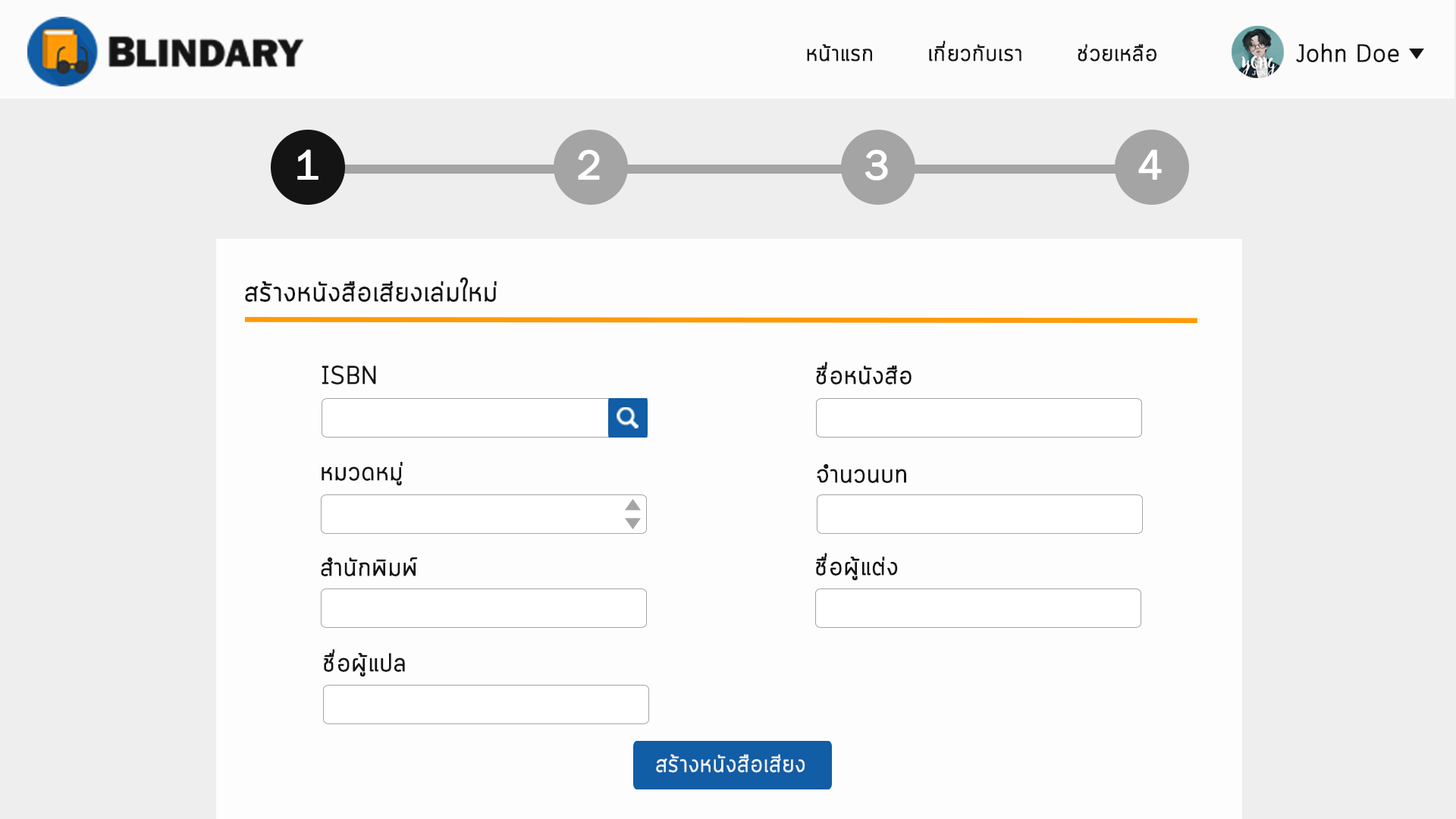
<style>
.page{position:relative;width:1456px;height:819px;background:#fdfdfd}
.page>*{position:absolute;margin:0}
.t1{font:22.7px "Cloud-Light";color:#141414;font-weight:bold}
.t2{font:24.2px "Cloud-Light";color:#141414;font-weight:bold}
.t3{font:42.1px "FranklinGothic-Book";color:#ffffff;font-weight:bold}
.t4{font:42.1px "FranklinGothic-Book";color:#fefefe;font-weight:bold}
.t5{font:27.3px "Cloud-Light";color:#141414;font-weight:bold}
.t6{font:25px "Cloud-Light";color:#141414;font-weight:bold}
.t7{font:23.7px "Cloud-Light";color:#efefef;font-weight:bold}
</style>
<div class="page">
<p class="t1" style="left:807px;top:40px;width:349px;height:21px">หน้าแรก       เกี่ยวกับเรา       ช่วยเหลือ</p>
<p class="t2" style="left:1296px;top:43px;width:103px;height:19px">John Doe</p>
<p class="t3" style="left:297px;top:149px;width:21px;height:31px">1</p>
<p class="t4" style="left:578px;top:149px;width:22px;height:31px">2</p>
<p class="t3" style="left:865px;top:149px;width:23px;height:31px">3</p>
<p class="t3" style="left:1138px;top:149px;width:24px;height:31px">4</p>
<p class="t5" style="left:245px;top:277px;width:252px;height:25px">สร้างหนังสือเสียงเล่มใหม่</p>
<p class="t6" style="left:322px;top:366px;width:54px;height:18px">ISBN</p>
<p class="t6" style="left:816px;top:362px;width:96px;height:22px">ชื่อหนังสือ</p>
<p class="t6" style="left:322px;top:462px;width:81px;height:24px">หมวดหมู่</p>
<p class="t6" style="left:817px;top:464px;width:89px;height:19px">จำนวนบท</p>
<p class="t6" style="left:321px;top:557px;width:97px;height:19px">สำนักพิมพ์</p>
<p class="t6" style="left:816px;top:553px;width:82px;height:28px">ชื่อผู้แต่ง</p>
<p class="t6" style="left:324px;top:649px;width:81px;height:28px">ชื่อผู้แปล</p>
<p class="t7" style="left:656px;top:754px;width:149px;height:19px">สร้างหนังสือเสียง</p>
</div>
